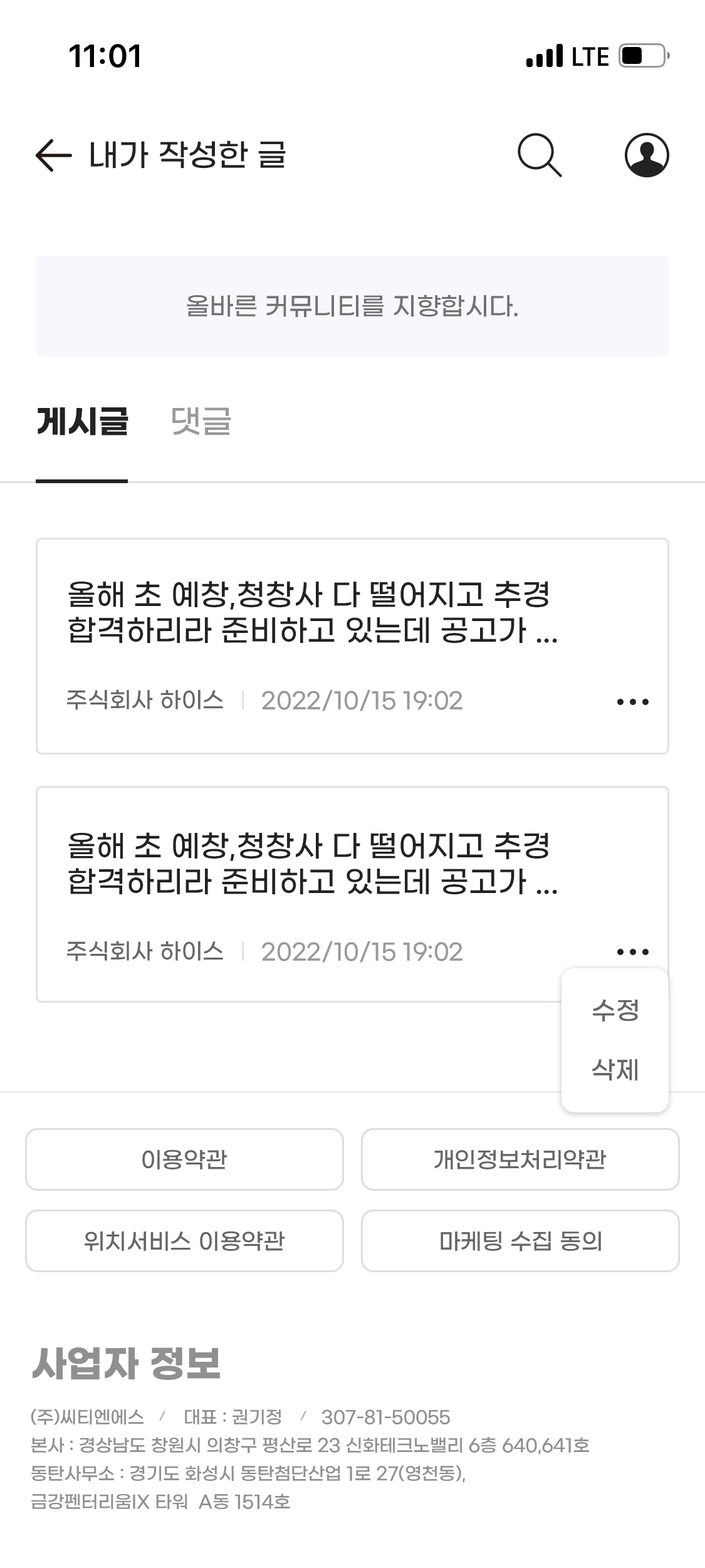
<style>
.page{position:relative;width:705px;height:1568px;background:#ffffff}
.page>*{position:absolute;margin:0}
.t1{font:31.3px "GmarketSansMedium";color:#222222}
.t2{font:25.1px "GmarketSansMedium";color:#727272}
.t3{font:32.6px "GmarketSansBold";color:#222222}
.t4{font:32.6px "GmarketSansMedium";color:#999999}
.t5{font:30.1px "GmarketSansMedium";color:#222222}
.t6{font:22.6px "GmarketSansMedium";color:#666666}
.t7{font:22.6px "GmarketSansMedium";color:#999999}
.t8{font:25.1px "GmarketSansMedium";color:#666666}
.t9{font:37.6px "GmarketSansBold";color:#909090}
.t10{font:17.5px/28.2px "GmarketSansMedium";color:#909090}
</style>
<div class="page">
<p class="t1" style="left:91px;top:140px;width:195px;height:29px">내가 작성한 글</p>
<p class="t2" style="left:187px;top:295px;width:331px;height:22px">올바른 커뮤니티를 지향합시다.</p>
<p class="t3" style="left:38px;top:407px;width:90px;height:29px">게시글</p>
<p class="t4" style="left:172px;top:407px;width:59px;height:29px">댓글</p>
<p class="t5" style="left:68px;top:581px;width:489px;height:62px">올해 초 예창,청창사 다 떨어지고 추경 <br>합격하리라 준비하고 있는데 공고가 ...</p>
<p class="t6" style="left:67px;top:689px;width:156px;height:21px">주식회사 하이스</p>
<p class="t7" style="left:262px;top:689px;width:201px;height:22px">2022/10/15 19:02</p>
<p class="t5" style="left:68px;top:832px;width:489px;height:62px">올해 초 예창,청창사 다 떨어지고 추경 <br>합격하리라 준비하고 있는데 공고가 ...</p>
<p class="t6" style="left:67px;top:941px;width:156px;height:20px">주식회사 하이스</p>
<p class="t7" style="left:262px;top:941px;width:201px;height:22px">2022/10/15 19:02</p>
<p class="t8" style="left:593px;top:999px;width:45px;height:23px">수정</p>
<p class="t8" style="left:592px;top:1059px;width:45px;height:22px">삭제</p>
<p class="t6" style="left:142px;top:1149px;width:85px;height:20px">이용약관</p>
<p class="t6" style="left:434px;top:1149px;width:173px;height:20px">개인정보처리약관</p>
<p class="t6" style="left:85px;top:1231px;width:200px;height:20px">위치서비스 이용약관</p>
<p class="t6" style="left:441px;top:1231px;width:160px;height:21px">마케팅 수집 동의</p>
<p class="t9" style="left:33px;top:1347px;width:187px;height:33px">사업자 정보</p>
<p class="t10" style="left:31px;top:1409px;width:558px;height:100px">(주)씨티엔에스        대표 : 권기정        307-81-50055<br>본사 : 경상남도 창원시 의창구 평산로 23 신화테크노밸리 6층 640,641호<br>동탄사무소 : 경기도 화성시 동탄첨단산업 1로 27(영천동),<br>금강펜터리움IX 타워  A동 1514호</p>
</div>
